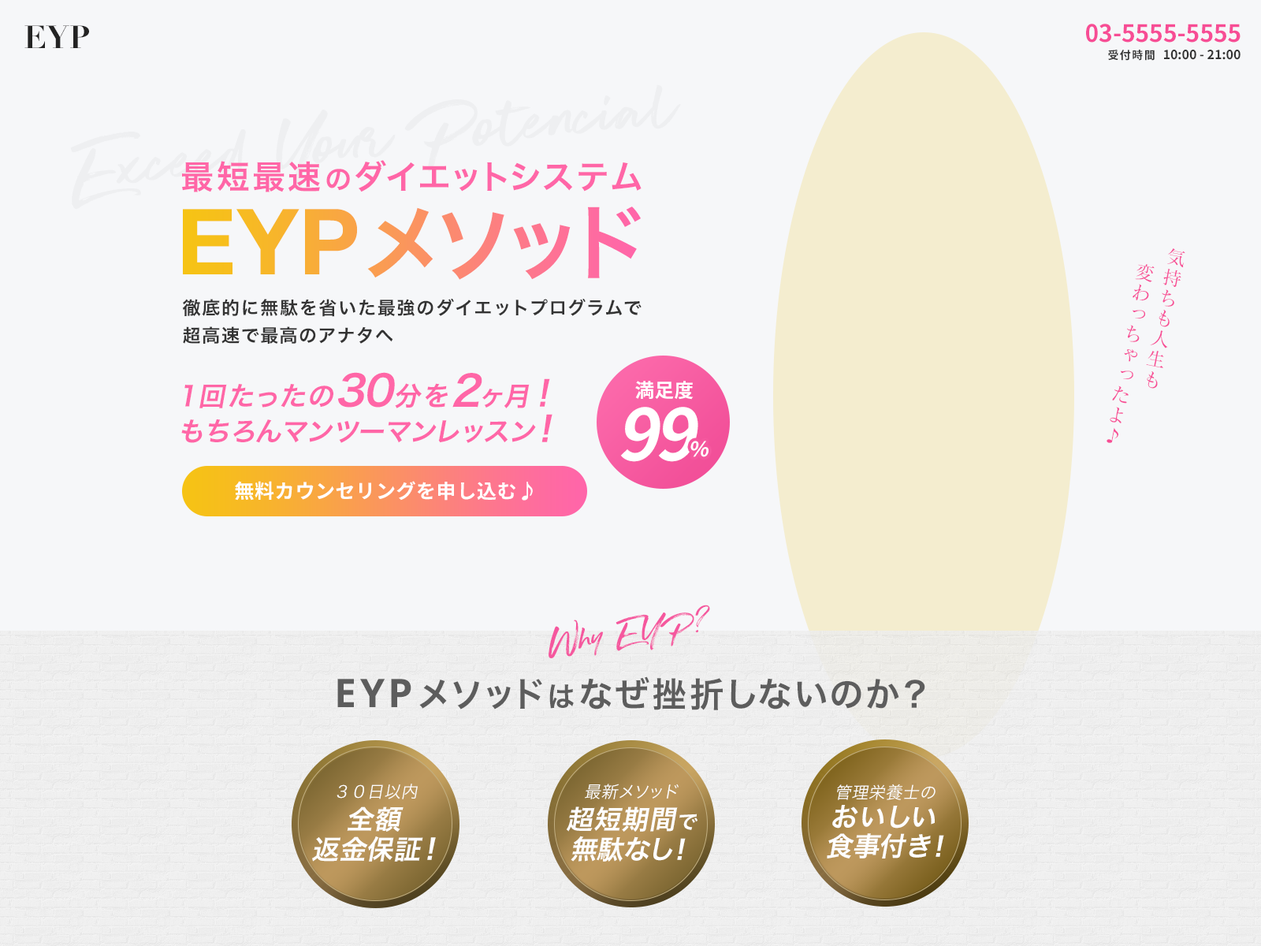
<style>
.page{position:relative;width:1261px;height:946px;background:#f6f7f9}
.page>*{position:absolute;margin:0}
.t1{font:31.5px "Didot-Bold";letter-spacing:0.01em;color:#232323}
.t2{font:23.6px "NotoSansJP-Bold";color:#f74d95}
.t3{font:11px "NotoSansJP-Bold";letter-spacing:0.1em;color:#333333}
.t4{font:12.6px "NotoSansJP-Bold";color:#333333}
.t5{font:84.3px "SuperFlyOne";color:#eeeff1}
.t6{font:33.1px "HiraKakuPro-W6";letter-spacing:0.1em;color:#ff66a7}
.t7{font:27px "HiraKakuPro-W6";letter-spacing:0.1em;color:#ff66a7}
.t8{font:82.7px "HiraKakuPro-W6";letter-spacing:0.01em}
.t9{font:91.4px "HelveticaNeue-Bold";letter-spacing:0.01em}
.t10{font:18.9px/27.7px "MatisseProN-M";letter-spacing:0.1em;color:#f74d95}
.t11{font:18.1px/27.6px "HiraKakuPro-W6";letter-spacing:0.075em;color:#333333}
.t12{font:26.8px/35.6px "HiraKakuPro-W6";letter-spacing:0.01em;color:#ff66a7;font-style:italic}
.t13{font:26.8px/35.6px "HiraKakuPro-W6";letter-spacing:0.05em;color:#ff66a7;font-style:italic}
.t14{font:41.7px/35.6px "HiraKakuPro-W6";letter-spacing:0.05em;color:#ff66a7;font-style:italic}
.t15{font:34.7px/35.6px "HiraKakuPro-W6";letter-spacing:0.05em;color:#ff66a7;font-style:italic}
.t16{font:19.2px "NotoSansJP-Bold";letter-spacing:0.025em;color:#ffffff}
.t17{font:70.8px "NotoSansJP-Bold";letter-spacing:0.025em;color:#ffffff;font-style:italic}
.t18{font:20.6px "NotoSansJP-Bold";letter-spacing:0.025em;color:#ffffff;font-style:italic}
.t19{font:19.7px "NotoSansJP-Bold";letter-spacing:0.025em;color:#ffffff}
.t20{font:19.7px "NotoSansJP-Bold";letter-spacing:0.025em;color:#ffffff;font-weight:bold}
.t21{font:39.4px "SuperFlyOne";color:#f5579e}
.t22{font:34.4px "HiraKakuPro-W6";letter-spacing:0.1em;color:#5d5d5d}
.t23{font:39.4px "OpenSans-Bold";letter-spacing:0.1em;color:#5d5d5d}
.t24{font:34.5px "HiraKakuPro-W6";letter-spacing:0.1em;color:#5d5d5d}
.t25{font:28.2px "HiraKakuPro-W6";letter-spacing:0.1em;color:#5d5d5d}
.t26{font:16.5px "HiraKakuPro-W3";letter-spacing:0.025em;color:#fefefe;font-style:italic}
.t27{font:26.8px/29.6px "HiraKakuPro-W6";letter-spacing:0.025em;color:#fefefe;font-style:italic}
.t28{font:28.3px/29.6px "HiraKakuPro-W6";letter-spacing:0.025em;color:#fefefe;font-style:italic}
.t29{font:26.8px/29.5px "HiraKakuPro-W6";letter-spacing:0.025em;color:#fefefe;font-style:italic}
.t30{font:20.5px/29.5px "HiraKakuPro-W6";letter-spacing:0.025em;color:#fefefe;font-style:italic}
</style>
<div class="page">
<p class="t1" style="left:24px;top:25px;width:65px;height:23px">EYP</p>
<p class="t2" style="left:1086px;top:24px;width:154px;height:19px">03-5555-5555</p>
<p class="t3" style="left:1108px;top:50px;width:47px;height:11px">受付時間</p>
<p class="t4" style="left:1164px;top:50px;width:76px;height:10px">10:00 - 21:00</p>
<p class="t5" style="left:71px;top:84px;width:610px;height:126px;rotate:-6deg">Exceed Your Potencial</p>
<p class="t6" style="left:182px;top:160px;width:459px;height:32px">最短最速<span class="t7">の</span>ダイエットシステム</p>
<p class="t8" style="left:183px;top:206px;width:458px;height:74px"><span class="t9">EYP </span>メソッド</p>
<p class="t10" style="left:1106px;top:248px;width:79px;height:195px;rotate:11deg">気持ちも人生も<br>　変わっちゃったよ♪</p>
<p class="t11" style="left:182px;top:298px;width:459px;height:46px">徹底的に無駄を省いた最強のダイエットプログラムで<br>超高速で最高のアナタへ</p>
<p class="t12" style="left:181px;top:372px;width:371px;height:71px"><span class="t13">1回たったの</span><span class="t14">30</span><span class="t13">分を</span><span class="t14">2</span><span class="t13">ヶ月</span><span class="t15">！<br></span>もちろんマンツーマンレッスン<span class="t15">！</span></p>
<p class="t16" style="left:635px;top:381px;width:59px;height:19px">満足度</p>
<p class="t17" style="left:620px;top:407px;width:78px;height:55px">99</p>
<p class="t18" style="left:690px;top:441px;width:18px;height:16px">%</p>
<p class="t19" style="left:235px;top:481px;width:298px;height:19px">無料カウンセリングを申し込む<span class="t20">♪</span></p>
<p class="t21" style="left:548px;top:604px;width:162px;height:54px;rotate:-6deg">Why EYP?</p>
<p class="t22" style="left:337px;top:676px;width:588px;height:34px"><span class="t23">EYP </span><span class="t24">メソッド</span><span class="t25">は</span>なぜ挫折しないのか？</p>
<p class="t26" style="left:337px;top:783px;width:81px;height:16px">３０日以内</p>
<p class="t26" style="left:585px;top:783px;width:94px;height:16px">最新メソッド</p>
<p class="t26" style="left:837px;top:783px;width:98px;height:17px">管理栄養士の</p>
<p class="t27" style="left:312px;top:806px;width:124px;height:55px;text-align:center">全額<br>返金保証<span class="t28">！</span></p>
<p class="t29" style="left:566px;top:806px;width:131px;height:55px;text-align:center">超短期間<span class="t30">で<br></span>無駄なし！</p>
<p class="t29" style="left:827px;top:805px;width:117px;height:53px;text-align:center">おいしい<br>食事付き！</p>
</div>
